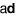
<style>
.page{position:relative;width:16px;height:16px;background:#ffffff}
.page>*{position:absolute;margin:0}
.t1{font:14px "HelveticaNeue";letter-spacing:-0.05em;color:#000000}
.t2{font:14px "HelveticaNeue-Bold";letter-spacing:-0.05em;color:#000000}
</style>
<div class="page">
<p class="t1" style="left:0px;top:3px;width:15px;height:11px">a<span class="t2">d</span></p>
</div>
